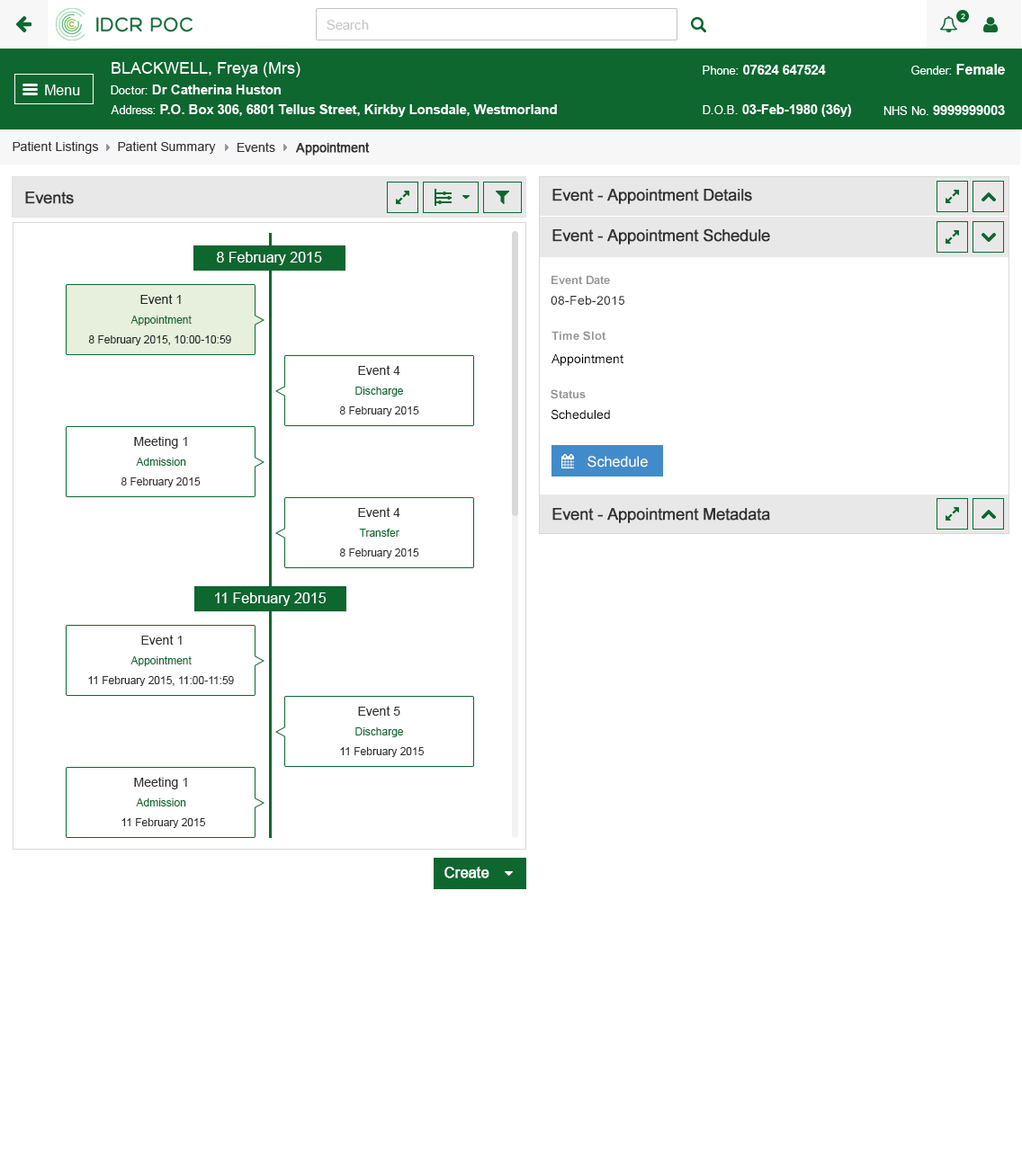
<style>
.page{position:relative;width:1022px;height:1167px;background:#ffffff}
.page>*{position:absolute;margin:0}
.t1{font:12.6px "ArialMT";color:#313131}
.t2{font:12.6px "ArialMT";color:#313131;font-weight:bold}
.t3{font:16.2px "ArialMT";color:#303030;font-weight:bold}
.t4{font:14.4px "ArialMT";color:#ffffff}
.t5{font:11.7px "Arial-BoldMT";color:#959595}
.t6{font:12.6px "ArialMT";color:#242424}
.t7{font:12.6px "ArialMT";color:#303030}
.t8{font:10.8px "ArialMT";color:#0d672f}
.t9{font:10.8px "ArialMT";color:#242424}
.t10{font:12.6px "ArialMT";color:#000000}
.t11{font:10.8px "ArialMT";color:#303030}
.t12{font:14.4px "ArialMT";color:#ffffff;font-weight:bold}
</style>
<div class="page">
<p class="t1" style="left:13px;top:141px;width:86px;height:13px">Patient Listings</p>
<p class="t1" style="left:118px;top:141px;width:98px;height:13px">Patient Summary</p>
<p class="t1" style="left:237px;top:142px;width:38px;height:10px">Events</p>
<p class="t2" style="left:296px;top:142px;width:74px;height:14px">Appointment</p>
<p class="t3" style="left:25px;top:192px;width:49px;height:12px">Events</p>
<p class="t3" style="left:552px;top:189px;width:200px;height:15px">Event - Appointment Details</p>
<p class="t3" style="left:552px;top:228px;width:218px;height:17px">Event - Appointment Schedule</p>
<p class="t4" style="left:217px;top:252px;width:105px;height:13px">8 February 2015</p>
<p class="t5" style="left:551px;top:275px;width:59px;height:9px">Event Date</p>
<p class="t6" style="left:140px;top:294px;width:41px;height:10px">Event 1</p>
<p class="t7" style="left:550px;top:296px;width:74px;height:9px">08-Feb-2015</p>
<p class="t8" style="left:130px;top:316px;width:62px;height:10px">Appointment</p>
<p class="t9" style="left:88px;top:335px;width:143px;height:10px">8 February 2015, 10:00-10:59</p>
<p class="t5" style="left:551px;top:331px;width:55px;height:10px">Time Slot</p>
<p class="t7" style="left:358px;top:365px;width:42px;height:10px">Event 4</p>
<p class="t10" style="left:551px;top:354px;width:72px;height:12px">Appointment</p>
<p class="t8" style="left:355px;top:387px;width:48px;height:10px">Discharge</p>
<p class="t5" style="left:550px;top:389px;width:35px;height:10px">Status</p>
<p class="t11" style="left:339px;top:406px;width:80px;height:10px">8 February 2015</p>
<p class="t10" style="left:550px;top:409px;width:60px;height:11px">Scheduled</p>
<p class="t7" style="left:134px;top:436px;width:53px;height:13px">Meeting 1</p>
<p class="t8" style="left:136px;top:458px;width:50px;height:8px">Admission</p>
<p class="t4" style="left:587px;top:456px;width:60px;height:12px">Schedule</p>
<p class="t11" style="left:121px;top:478px;width:80px;height:9px">8 February 2015</p>
<p class="t7" style="left:358px;top:507px;width:42px;height:10px">Event 4</p>
<p class="t3" style="left:552px;top:508px;width:218px;height:15px">Event - Appointment Metadata</p>
<p class="t8" style="left:359px;top:529px;width:40px;height:8px">Transfer</p>
<p class="t11" style="left:339px;top:549px;width:80px;height:9px">8 February 2015</p>
<p class="t4" style="left:215px;top:593px;width:111px;height:13px">11 February 2015</p>
<p class="t7" style="left:141px;top:635px;width:41px;height:10px">Event 1</p>
<p class="t8" style="left:130px;top:656px;width:62px;height:10px">Appointment</p>
<p class="t11" style="left:88px;top:676px;width:146px;height:10px">11 February 2015, 11:00-11:59</p>
<p class="t7" style="left:358px;top:706px;width:42px;height:10px">Event 5</p>
<p class="t8" style="left:355px;top:728px;width:48px;height:9px">Discharge</p>
<p class="t11" style="left:340px;top:747px;width:84px;height:10px">11 February 2015</p>
<p class="t7" style="left:134px;top:777px;width:53px;height:13px">Meeting 1</p>
<p class="t8" style="left:136px;top:799px;width:50px;height:8px">Admission</p>
<p class="t11" style="left:121px;top:818px;width:84px;height:10px">11 February 2015</p>
<p class="t12" style="left:444px;top:867px;width:45px;height:12px">Create</p>
</div>
